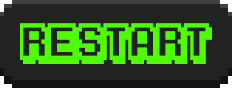
<style>
.page{position:relative;width:232px;height:88px;background:#222222}
.page>*{position:absolute;margin:0}
.t1{font:41.7px "KarmaticArcade";color:#4eff00;scale:0.76 1}
</style>
<div class="page">
<p class="t1" style="left:20px;top:23px;width:192px;height:41px">RESTART</p>
</div>
